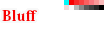
<style>
.page{position:relative;width:104px;height:32px;background:#ffffff}
.page>*{position:absolute;margin:0}
.t1{font:14px "KozMinPro-Heavy";letter-spacing:0.025em;color:#f80000}
.t2{font:14px "KozMinPro-Heavy";letter-spacing:0.1em;color:#f80000}
</style>
<div class="page">
<p class="t1" style="left:2px;top:10px;width:35px;height:11px">Blu<span class="t2">ff</span></p>
</div>
